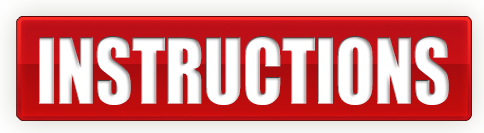
<style>
.page{position:relative;width:484px;height:133px}
.page>*{position:absolute;margin:0}
.t1{font:83.9px "Impact";letter-spacing:-0.01em;color:#ffffff;scale:0.87 1}
</style>
<div class="page">
<p class="t1" style="left:39px;top:36px;width:410px;height:69px">INSTRUCTIONS</p>
</div>
